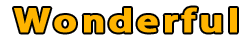
<style>
.page{position:relative;width:250px;height:39px;background:#ffffff}
.page>*{position:absolute;margin:0}
.t1{font:30.4px "AdobeGothicStd-Bold";letter-spacing:0.075em;color:#ffb400;font-weight:bold;scale:1.29 1}
</style>
<div class="page">
<p class="t1" style="left:14px;top:7px;width:223px;height:26px">Wonderful</p>
</div>
